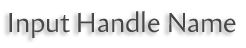
<style>
.page{position:relative;width:246px;height:48px;background:#ffffff}
.page>*{position:absolute;margin:0}
.t1{font:28px "Amira-Roman";color:#474747}
</style>
<div class="page">
<p class="t1" style="left:9px;top:11px;width:227px;height:28px">Input Handle Name</p>
</div>
